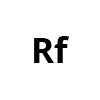
<style>
.page{position:relative;width:100px;height:100px;background:#ffffff}
.page>*{position:absolute;margin:0}
.t1{font:35px "OpenSans-Bold";color:#000000}
</style>
<div class="page">
<p class="t1" style="left:34px;top:36px;width:35px;height:27px">Rf</p>
</div>
